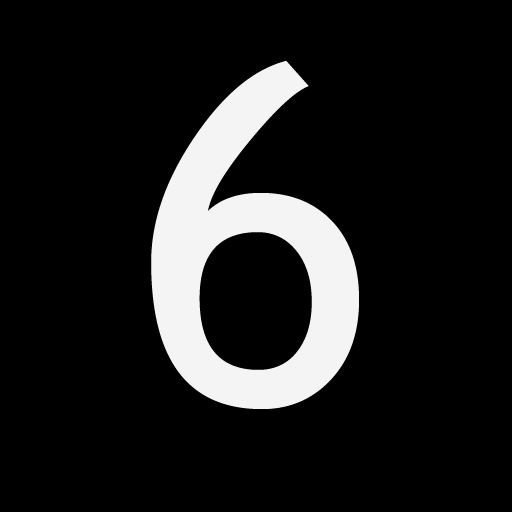
<style>
.page{position:relative;width:512px;height:512px;background:#000000}
.page>*{position:absolute;margin:0}
.t1{font:470px "TrebuchetMS";color:#f5f5f5}
</style>
<div class="page">
<p class="t1" style="left:151px;top:61px;width:208px;height:348px">6</p>
</div>
